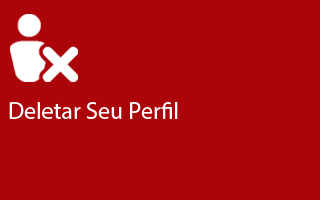
<style>
.page{position:relative;width:320px;height:200px;background:#ac0509}
.page>*{position:absolute;margin:0}
.t1{font:24px "MyriadPro-Regular";color:#feffff}
</style>
<div class="page">
<p class="t1" style="left:9px;top:102px;width:169px;height:17px">Deletar Seu Perfil</p>
</div>
